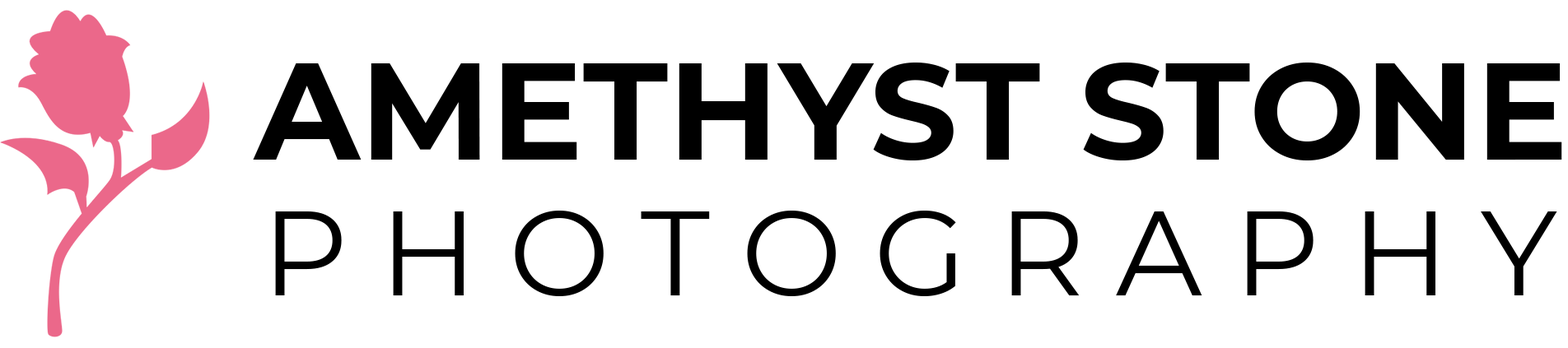
<style>
.page{position:relative;width:1568px;height:348px;background:#ffffff}
.page>*{position:absolute;margin:0}
.t1{font:137.3px "Montserrat-Bold";color:#000000}
.t2{font:120.1px "Montserrat-Regular";color:#000000}
</style>
<div class="page">
<p class="t1" style="left:253px;top:63px;width:1309px;height:98px">AMETHYST STONE</p>
<p class="t2" style="left:275px;top:211px;width:1282px;height:85px">P H O T O G R A P H Y</p>
</div>
